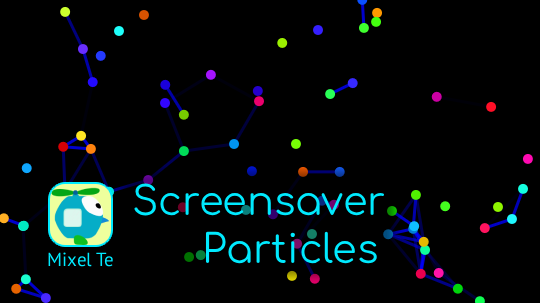
<style>
.page{position:relative;width:540px;height:303px;background:#000000}
.page>*{position:absolute;margin:0}
.t1{font:39.9px "Comfortaa-Regular";color:#00eaff}
.t2{font:19px "PTSans-Regular";color:#00eaff}
</style>
<div class="page">
<p class="t1" style="left:134px;top:183px;width:251px;height:81px">Screensaver <br>      Particles</p>
<p class="t2" style="left:48px;top:252px;width:65px;height:15px">Mixel Te</p>
</div>
